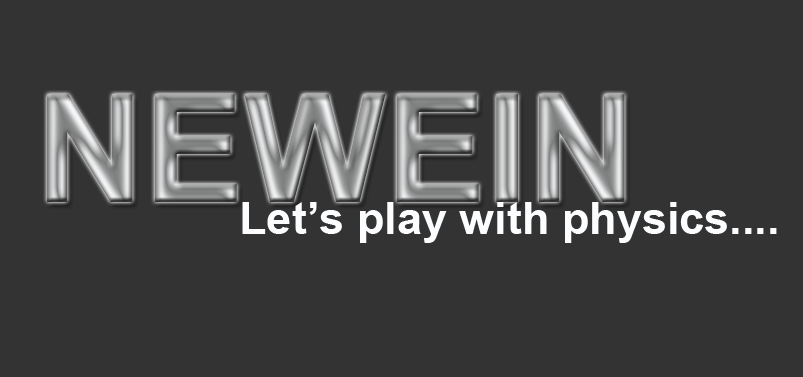
<style>
.page{position:relative;width:803px;height:377px;background:#333333}
.page>*{position:absolute;margin:0}
.t1{font:150px "Arial-BoldMT"}
.t2{font:45px "Arial-BoldMT";color:#fbfdfe}
</style>
<div class="page">
<p class="t1" style="left:47px;top:94px;width:578px;height:108px">NEWEIN</p>
<p class="t2" style="left:242px;top:202px;width:535px;height:41px">Let’s play with physics....</p>
</div>
